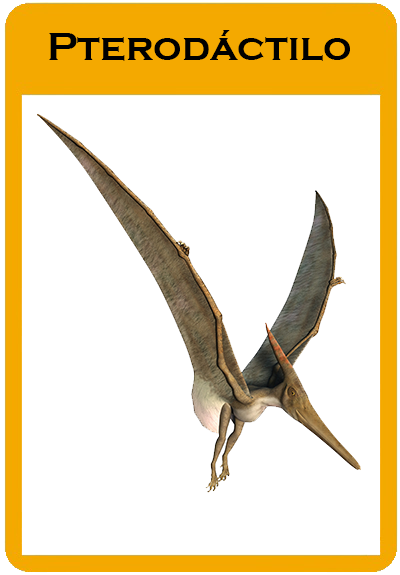
<style>
.page{position:relative;width:400px;height:575px;background:#ffffff}
.page>*{position:absolute;margin:0}
.t1{font:40px "CopperplateGothic-Bold";color:#000000}
</style>
<div class="page">
<p class="t1" style="left:49px;top:30px;width:301px;height:31px">Pterodáctilo</p>
</div>
